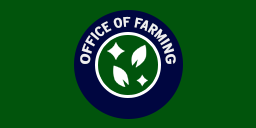
<style>
.page{position:relative;width:256px;height:128px;background:#01540c}
.page>*{position:absolute;margin:0}
.t1{font:9.8px "InterstateCondensed-Bold";color:#ffffff;text-transform:uppercase}
</style>
<div class="page">
<p class="t1" style="left:80px;top:16px;width:96px;height:48px;text-align:center;opacity:0.9">office of farming</p>
</div>
